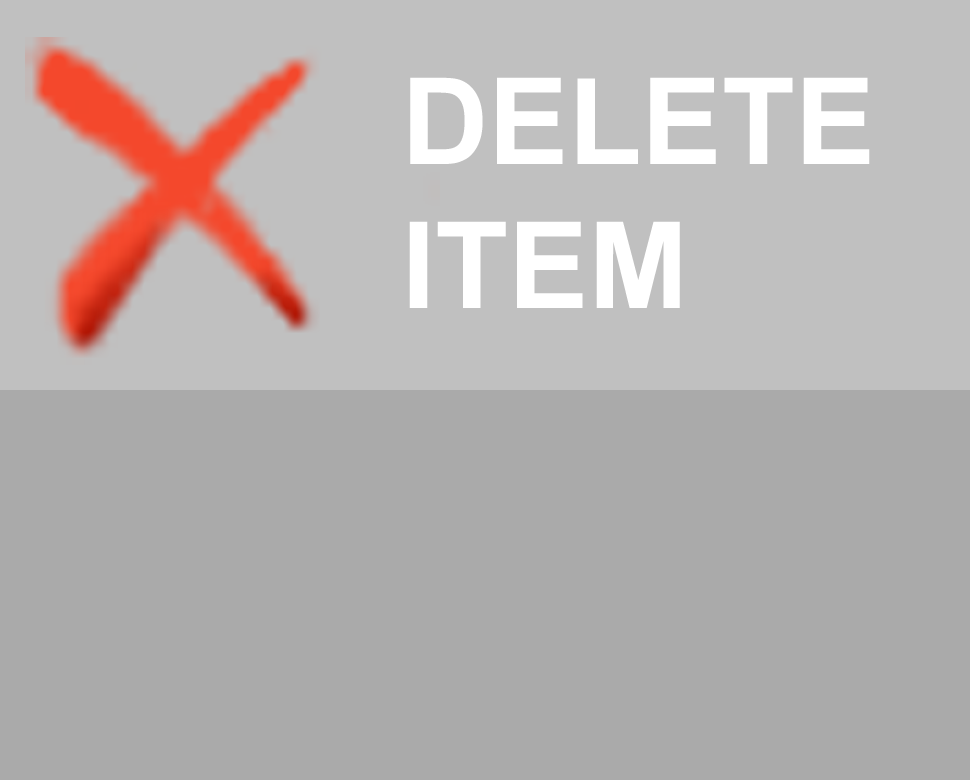
<style>
.page{position:relative;width:970px;height:780px;background:#aaaaaa}
.page>*{position:absolute;margin:0}
.t1{font:120px "Arial-BoldMT";color:#ffffff}
</style>
<div class="page">
<p class="t1" style="left:409px;top:77px;width:461px;height:231px">DELETE<br>ITEM</p>
</div>
